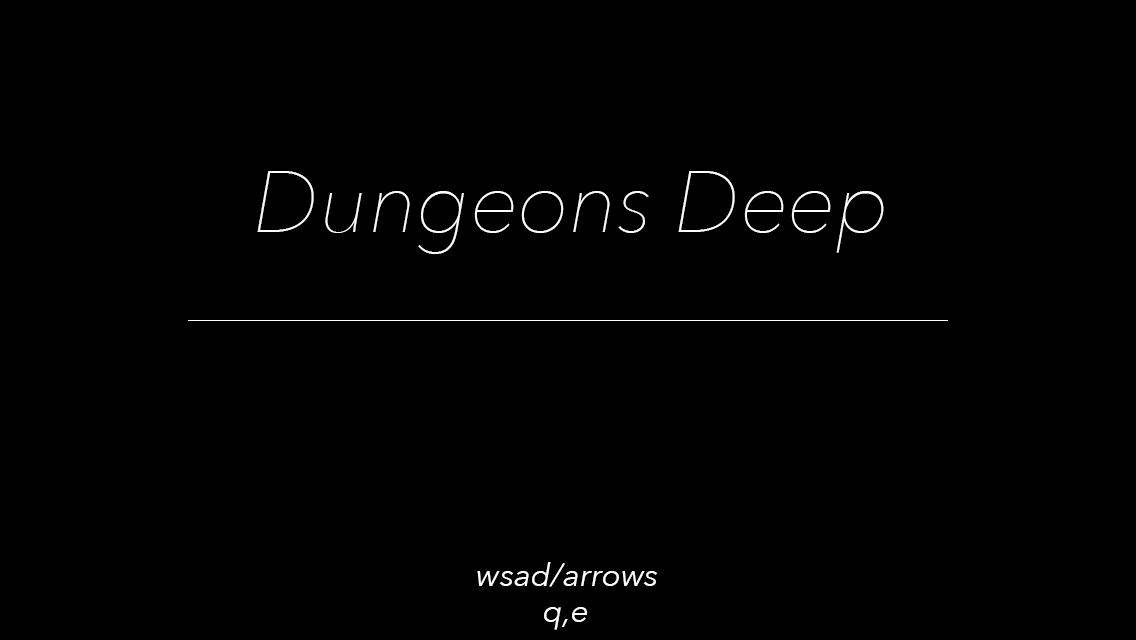
<style>
.page{position:relative;width:1136px;height:640px;background:#000000}
.page>*{position:absolute;margin:0}
.t1{font:86px "AvenirNext-UltraLightItalic";color:#fdfdfd}
.t2{font:32px "AvenirNext-Italic";color:#fdfdfd}
</style>
<div class="page">
<p class="t1" style="left:257px;top:171px;width:627px;height:83px">Dungeons Deep</p>
<p class="t2" style="left:477px;top:562px;width:180px;height:25px">wsad/arrows</p>
<p class="t2" style="left:544px;top:607px;width:44px;height:23px">q,e</p>
</div>
